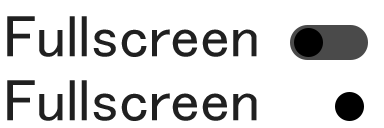
<style>
.page{position:relative;width:384px;height:128px;background:#ffffff}
.page>*{position:absolute;margin:0}
.t1{font:60px "MS-UIGothic";color:#202020}
</style>
<div class="page">
<p class="t1" style="left:7px;top:16px;width:250px;height:41px">Fullscreen</p>
<p class="t1" style="left:7px;top:80px;width:250px;height:41px">Fullscreen</p>
</div>
